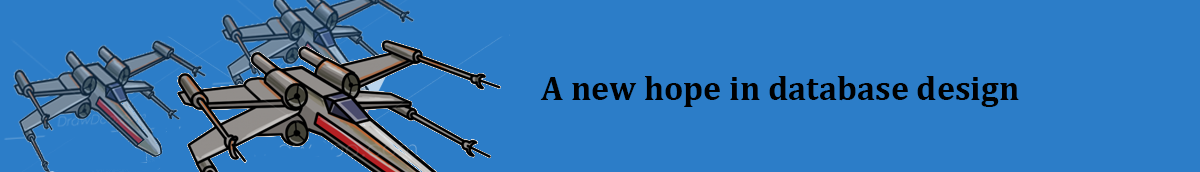
<style>
.page{position:relative;width:1200px;height:172px;background:#2c7dc8}
.page>*{position:absolute;margin:0}
.t1{font:34px "Cambria-Bold";color:#000000}
</style>
<div class="page">
<p class="t1" style="left:540px;top:76px;width:479px;height:31px">A new hope in database design</p>
</div>
